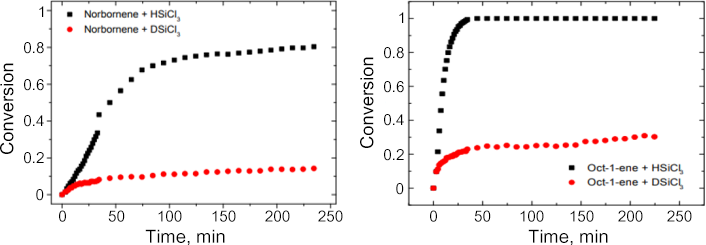
<style>
.page{position:relative;width:706px;height:245px;background:#ffffff}
.page>*{position:absolute;margin:0}
.t1{font:15.3px "ArialUnicodeMS";color:#000000}
.t2{font:18.3px "ArialUnicodeMS";color:#000000}
</style>
<div class="page">
<p class="t1" style="left:39px;top:6px;width:5px;height:11px">1</p>
<p class="t1" style="left:399px;top:12px;width:5px;height:11px">1</p>
<p class="t1" style="left:24px;top:42px;width:20px;height:12px">0.8</p>
<p class="t1" style="left:384px;top:47px;width:20px;height:12px">0.8</p>
<p class="t2" style="left:0px;top:63px;width:14px;height:91px;rotate:-90deg">Conversion</p>
<p class="t2" style="left:360px;top:57px;width:14px;height:91px;rotate:-90deg">Conversion</p>
<p class="t1" style="left:24px;top:79px;width:20px;height:12px">0.6</p>
<p class="t1" style="left:384px;top:81px;width:20px;height:12px">0.6</p>
<p class="t1" style="left:24px;top:115px;width:20px;height:12px">0.4</p>
<p class="t1" style="left:384px;top:114px;width:20px;height:12px">0.4</p>
<p class="t1" style="left:384px;top:149px;width:20px;height:12px">0.2</p>
<p class="t1" style="left:24px;top:152px;width:20px;height:12px">0.2</p>
<p class="t1" style="left:396px;top:183px;width:8px;height:12px">0</p>
<p class="t1" style="left:36px;top:189px;width:8px;height:12px">0</p>
<p class="t1" style="left:59px;top:210px;width:7px;height:12px">0</p>
<p class="t1" style="left:108px;top:210px;width:17px;height:12px">50</p>
<p class="t1" style="left:158px;top:210px;width:24px;height:12px">100</p>
<p class="t1" style="left:212px;top:210px;width:24px;height:12px">150</p>
<p class="t1" style="left:265px;top:210px;width:25px;height:12px">200</p>
<p class="t1" style="left:318px;top:210px;width:25px;height:12px">250</p>
<p class="t1" style="left:430px;top:210px;width:7px;height:12px">0</p>
<p class="t1" style="left:474px;top:210px;width:17px;height:12px">50</p>
<p class="t1" style="left:520px;top:210px;width:24px;height:12px">100</p>
<p class="t1" style="left:570px;top:210px;width:24px;height:12px">150</p>
<p class="t1" style="left:618px;top:210px;width:25px;height:12px">200</p>
<p class="t1" style="left:667px;top:210px;width:25px;height:12px">250</p>
<p class="t2" style="left:145px;top:229px;width:80px;height:17px">Time, min</p>
<p class="t2" style="left:528px;top:229px;width:80px;height:17px">Time, min</p>
</div>
